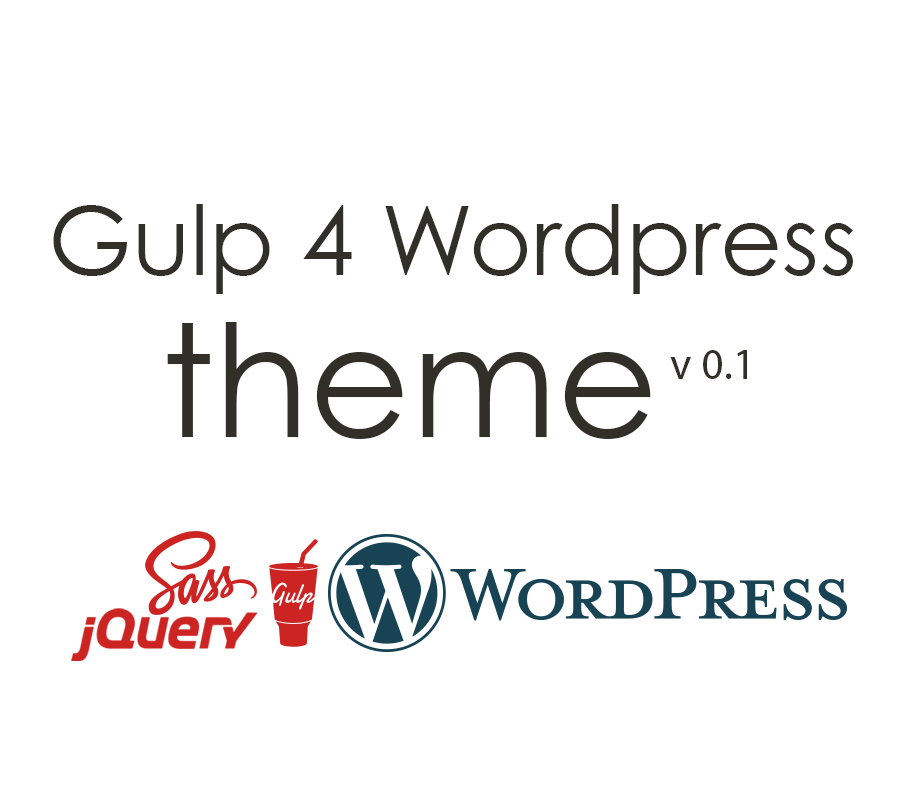
<style>
.page{position:relative;width:918px;height:799px;background:#ffffff}
.page>*{position:absolute;margin:0}
.t1{font:96px "CenturyGothic";color:#322f29}
.t2{font:156.1px "CenturyGothic";color:#322f29}
.t3{font:44.5px "MyriadPro-Regular";color:#322f29}
</style>
<div class="page">
<p class="t1" style="left:53px;top:204px;width:800px;height:90px">Gulp 4 Wordpress</p>
<p class="t2" style="left:167px;top:322px;width:484px;height:117px">theme</p>
<p class="t3" style="left:670px;top:350px;width:77px;height:29px">v 0.1</p>
</div>
